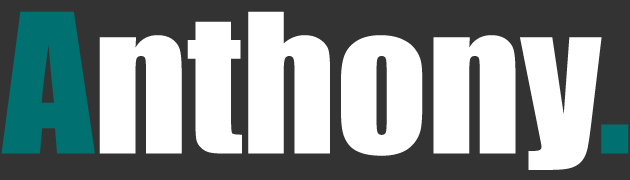
<style>
.page{position:relative;width:630px;height:180px;background:#333333}
.page>*{position:absolute;margin:0}
.t1{font:179.2px "Impact";color:#ffffff}
.t2{font:179.2px "Impact";color:#017071}
</style>
<div class="page">
<p class="t1" style="left:1px;top:11px;width:628px;height:159px"><span class="t2">A</span>nthony<span class="t2">.</span></p>
</div>
